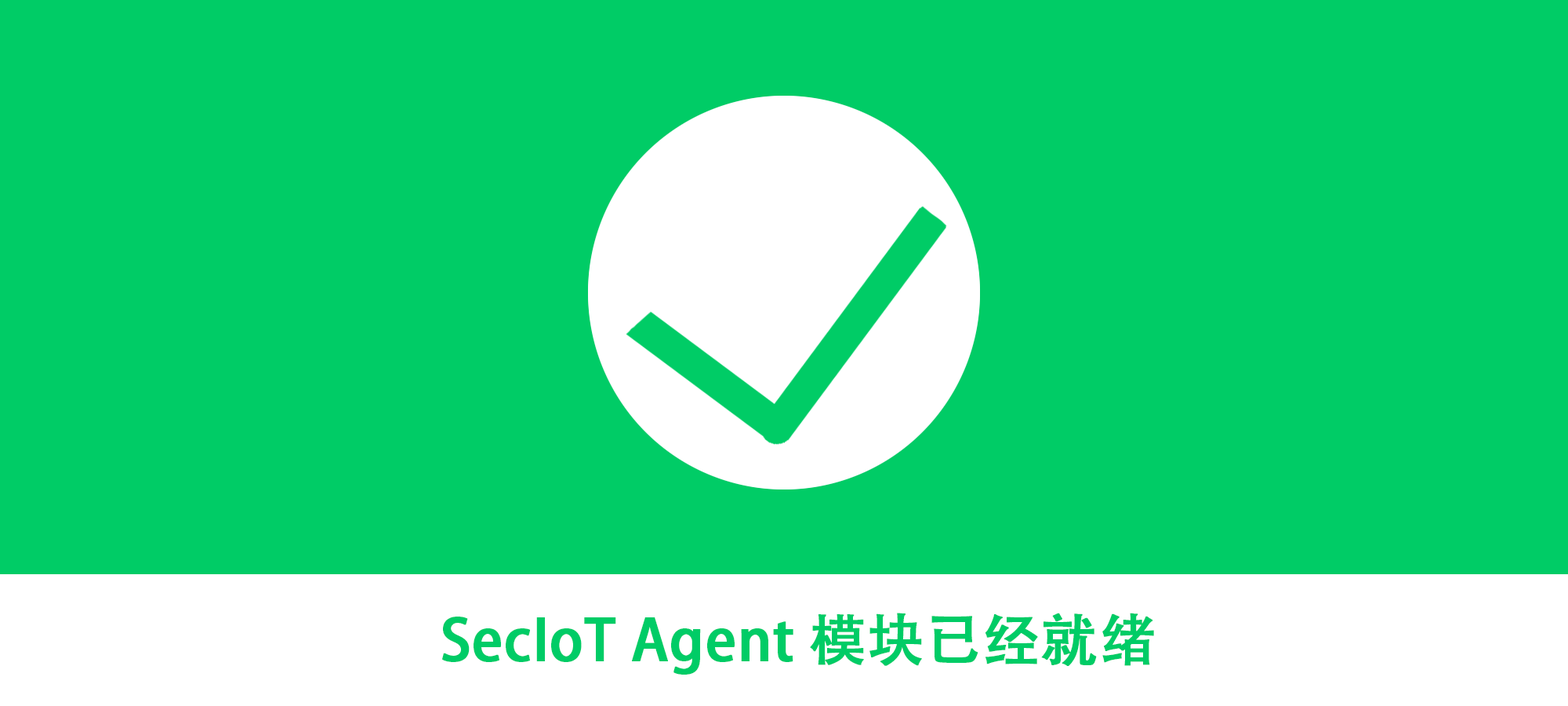
<style>
.page{position:relative;width:1568px;height:706px;background:#00cc66}
.page>*{position:absolute;margin:0}
.t1{font:56.4px "AdobeHeitiStd-Regular";color:#00cc66;font-weight:bold}
</style>
<div class="page">
<p class="t1" style="left:442px;top:612px;width:712px;height:62px">SecIoT Agent 模块已经就绪</p>
</div>
